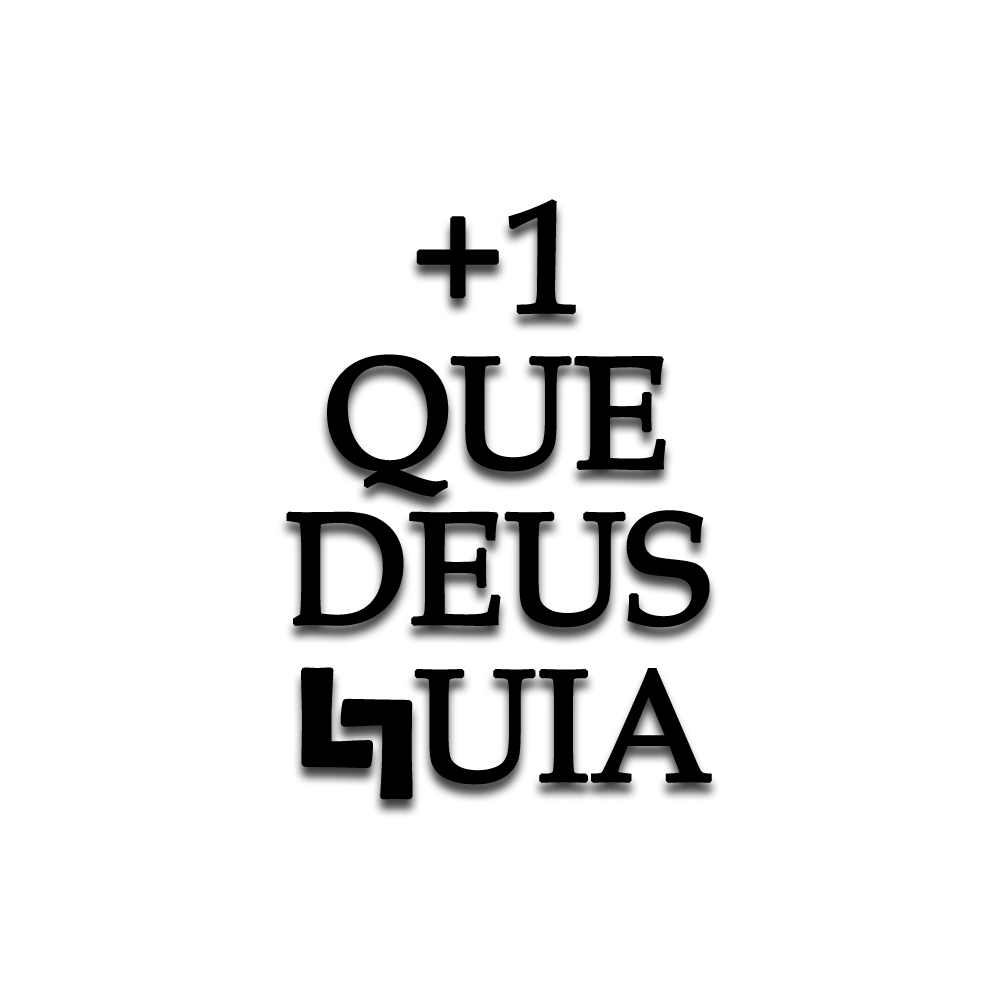
<style>
.page{position:relative;width:1000px;height:1000px;background:#ffffff}
.page>*{position:absolute;margin:0}
.t1{font:157.5px/155.8px "BookAntiqua";letter-spacing:-0.025em;color:#000000;text-transform:uppercase;font-weight:bold}
.t2{font:139.3px "BerlinSansFBDemi-Bold";letter-spacing:-0.025em;color:#000000;text-transform:uppercase;font-weight:bold}
.t3{font:157.5px "BookAntiqua";letter-spacing:-0.025em;color:#000000;text-transform:uppercase;font-weight:bold}
</style>
<div class="page">
<p class="t1" style="left:286px;top:199px;width:424px;height:429px;text-align:center">+1<br>que<br>Deus</p>
<p class="t2" style="left:301px;top:667px;width:72px;height:101px">L</p>
<p class="t3" style="left:414px;top:668px;width:298px;height:117px">UIA</p>
<p class="t2" style="left:340px;top:698px;width:73px;height:102px;rotate:180deg">L</p>
</div>
